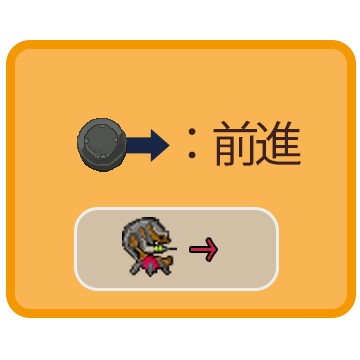
<style>
.page{position:relative;width:360px;height:360px;background:#f8b551}
.page>*{position:absolute;margin:0}
.t1{font:48px "KozGoPr6N-Regular";letter-spacing:-0.1em;color:#3e2020}
.t2{font:48px "KozGoPr6N-Regular";letter-spacing:-0.1em;color:#182746}
.t3{font:45.1px "KozGoPr6N-Regular";letter-spacing:-0.1em;color:#c32240;scale:0.6 1}
</style>
<div class="page">
<p class="t1" style="left:188px;top:120px;width:113px;height:46px">：前進</p>
<p class="t2" style="left:125px;top:129px;width:45px;height:33px">➡</p>
<p class="t3" style="left:191px;top:239px;width:25px;height:22px">→</p>
</div>
